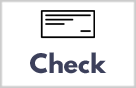
<style>
.page{position:relative;width:136px;height:88px;background:#ffffff}
.page>*{position:absolute;margin:0}
.t1{font:24px "LeagueSpartan-Bold";color:#3c405b}
</style>
<div class="page">
<p class="t1" style="left:30px;top:52px;width:77px;height:22px">Check</p>
</div>
